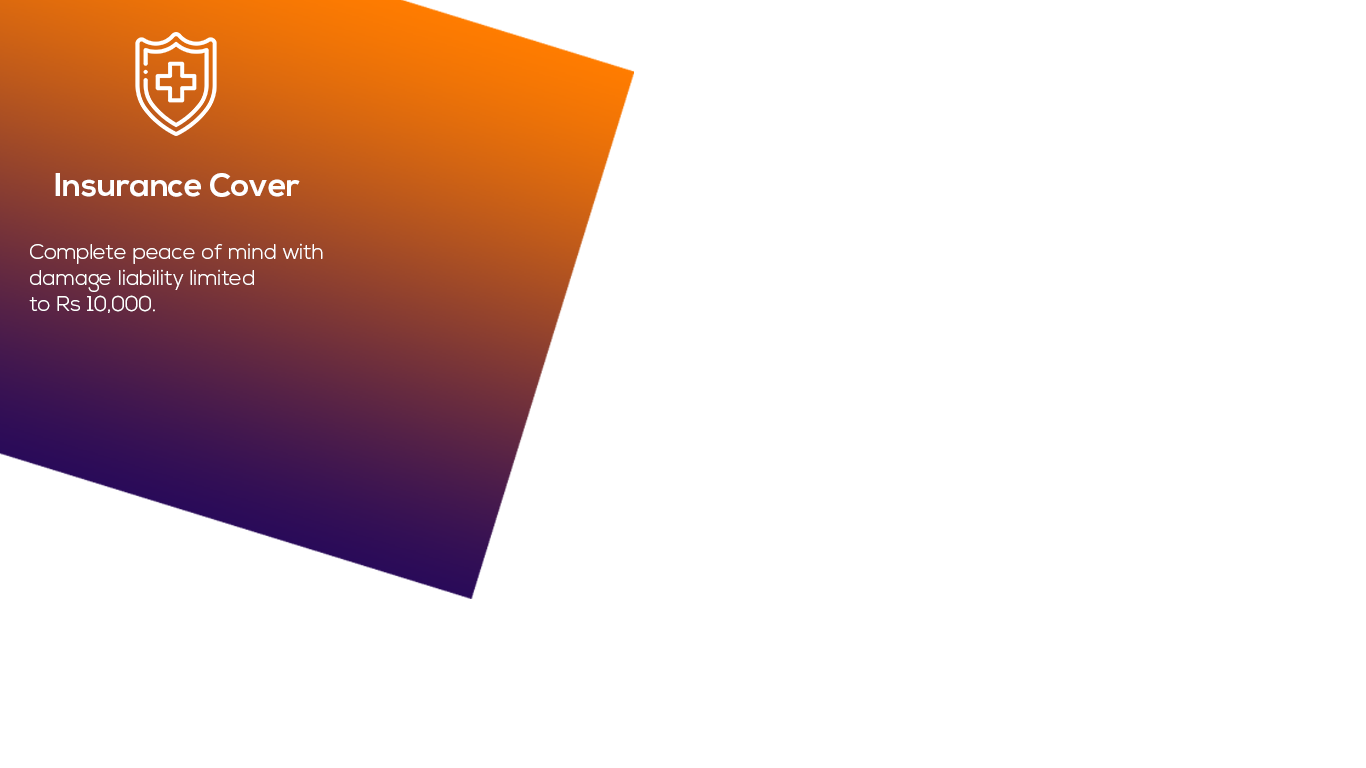
<style>
.page{position:relative;width:1366px;height:768px;background:#ffffff}
.page>*{position:absolute;margin:0}
.t1{font:32px "NexaBold";color:#ffffff}
.t2{font:21.3px "NexaLight";color:#ffffff}
</style>
<div class="page">
<p class="t1" style="left:55px;top:173px;width:245px;height:24px">Insurance Cover</p>
<p class="t2" style="left:29px;top:243px;width:294px;height:70px">Complete peace of mind with <br>damage liability limited <br>to Rs 10,000.</p>
</div>
